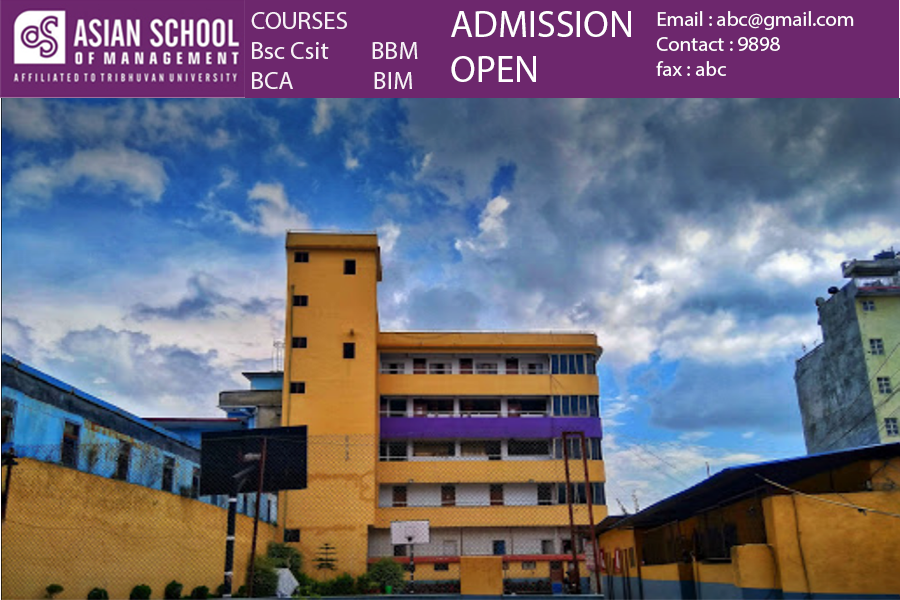
<style>
.page{position:relative;width:900px;height:600px}
.page>*{position:absolute;margin:0}
.t1{font:25px "MyriadPro-Regular";color:#f7f0f7}
.t2{font:37.5px "MyriadPro-Regular";color:#ffffff}
.t3{font:20.8px "MyriadPro-Regular";color:#ffffff}
</style>
<div class="page">
<p class="t1" style="left:251px;top:12px;width:167px;height:77px">COURSES <br>Bsc Csit        BBM <br>BCA               BIM</p>
<p class="t2" style="left:451px;top:11px;width:180px;height:71px">ADMISSION<br>OPEN</p>
<p class="t3" style="left:656px;top:11px;width:198px;height:65px">Email : abc@gmail.com<br>Contact : 9898<br>fax : abc</p>
</div>
